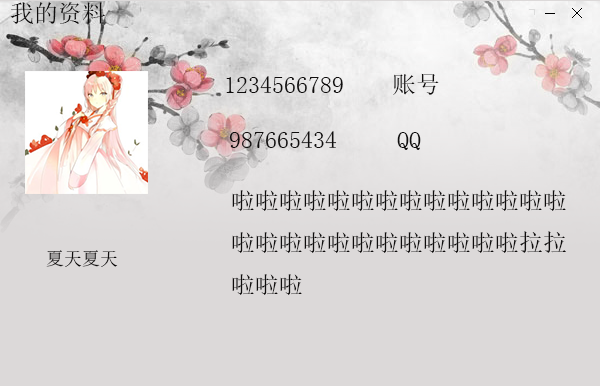
<style>
.page{position:relative;width:600px;height:386px;background:#dcd9d9}
.page>*{position:absolute;margin:0}
.t1{font:24px "SimSun";color:#0f0d0d}
.t2{font:18px "SimSun";color:#0f0d0d}
</style>
<div class="page">
<p class="t1" style="left:11px;top:2px;width:95px;height:22px">我的资料</p>
<p class="t1" style="left:226px;top:73px;width:213px;height:22px">1234566789    账号</p>
<p class="t1" style="left:229px;top:131px;width:192px;height:19px">987665434     QQ</p>
<p class="t1" style="left:232px;top:190px;width:334px;height:105px">啦啦啦啦啦啦啦啦啦啦啦啦啦啦<br>啦啦啦啦啦啦啦啦啦啦啦啦拉拉<br>啦啦啦</p>
<p class="t2" style="left:46px;top:250px;width:72px;height:17px">夏天夏天</p>
</div>
